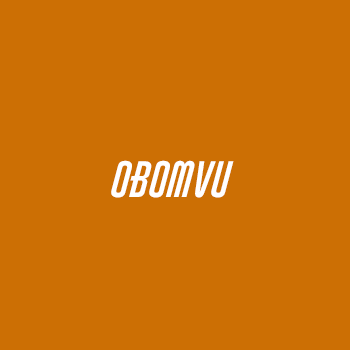
<style>
.page{position:relative;width:350px;height:350px;background:#cc6f04}
.page>*{position:absolute;margin:0}
.t1{font:47.7px "AirAmerica-Regular";color:#ffffff}
</style>
<div class="page">
<p class="t1" style="left:111px;top:160px;width:123px;height:38px">OBOMVU</p>
</div>
